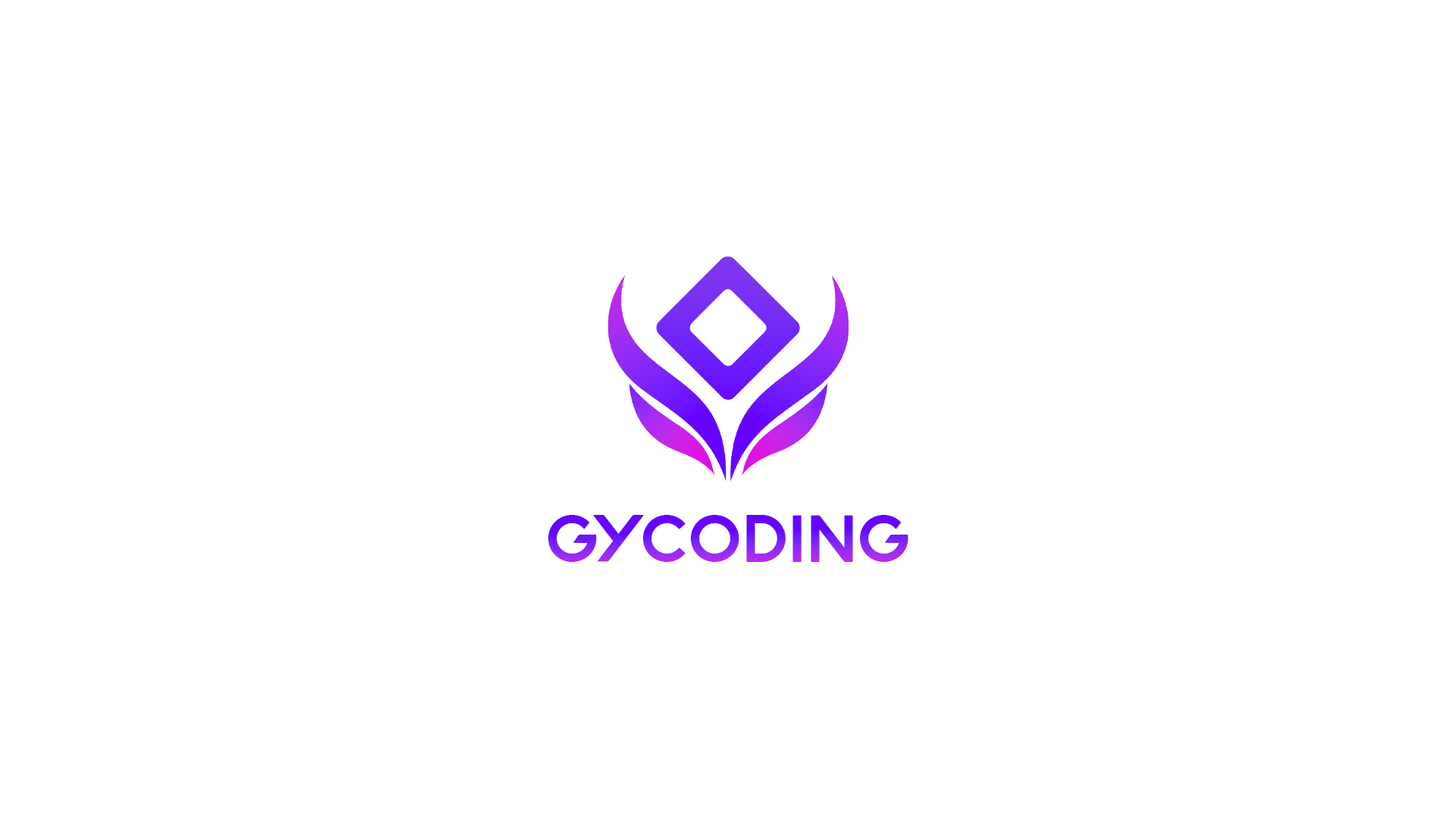
<style>
.page{position:relative;width:1456px;height:819px;background:#ffffff}
.page>*{position:absolute;margin:0}
.t1{font:66.4px "VALORANT-Regular"}
</style>
<div class="page">
<p class="t1" style="left:548px;top:515px;width:360px;height:47px">GyCODING</p>
</div>
